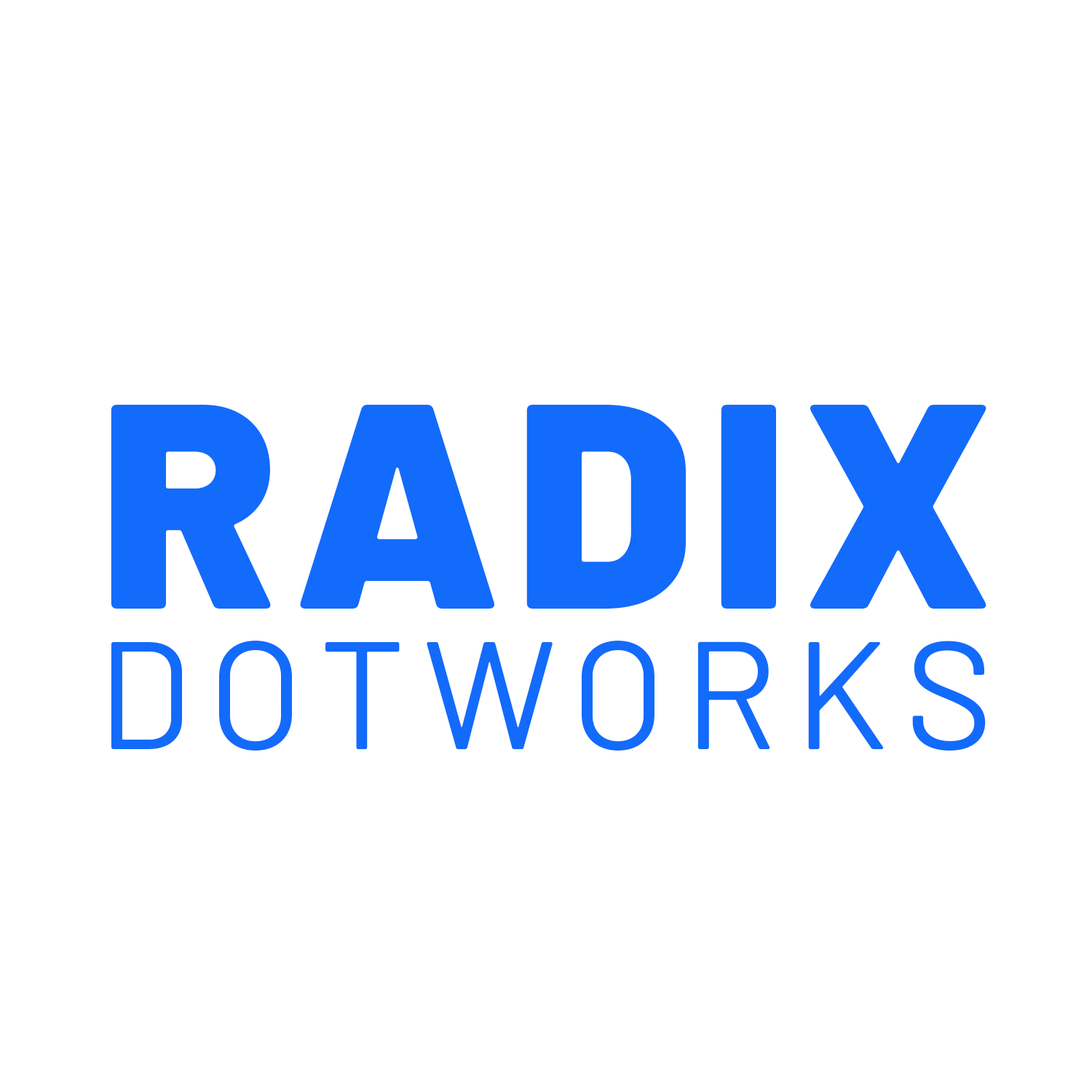
<style>
.page{position:relative;width:1092px;height:1092px;background:#ffffff}
.page>*{position:absolute;margin:0}
.t1{font:291.2px "Barlow-Black";letter-spacing:0.05em;color:#126bfb}
.t2{font:152.9px "Barlow-Regular";letter-spacing:0.115em;color:#126bfb}
</style>
<div class="page">
<p class="t1" style="left:111px;top:404px;width:875px;height:205px">RADIX</p>
<p class="t2" style="left:111px;top:641px;width:875px;height:110px">DOTWORKS</p>
</div>
